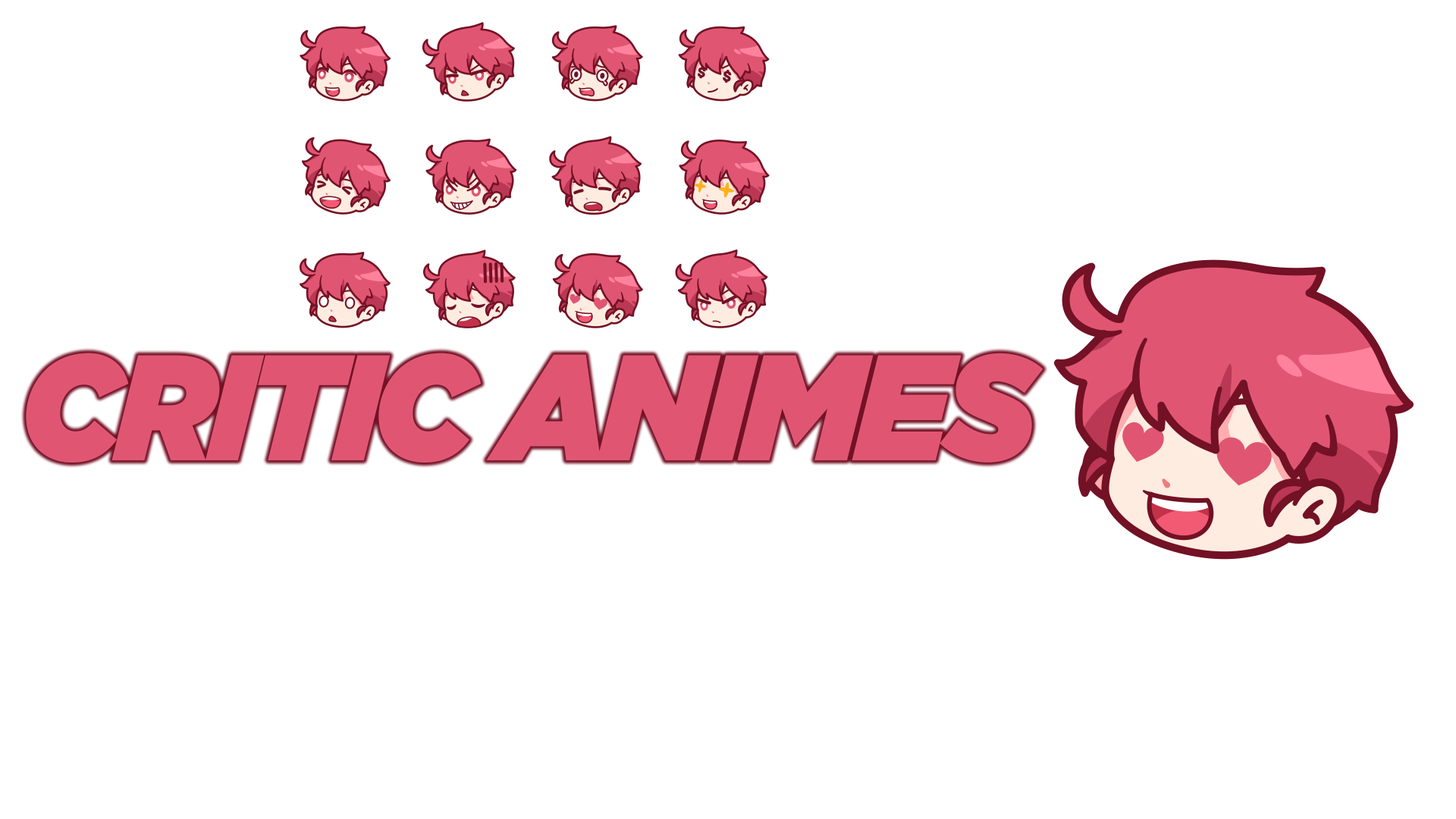
<style>
.page{position:relative;width:1456px;height:819px;background:#ffffff}
.page>*{position:absolute;margin:0}
.t1{font:149.9px "Gotham-UltraItalic";letter-spacing:-0.04em;color:#e05672;scale:0.93 1}
</style>
<div class="page">
<p class="t1" style="left:26px;top:353px;width:1017px;height:110px">CRITIC ANIMES</p>
</div>
